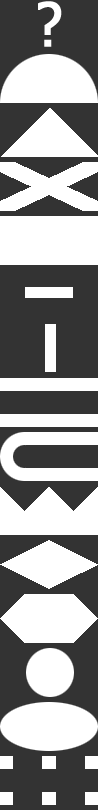
<style>
.page{position:relative;width:98px;height:810px;background:#333333}
.page>*{position:absolute;margin:0}
.t1{font:60px "Tahoma";color:#ffffff;text-transform:uppercase;font-weight:bold;scale:0.92 1}
</style>
<div class="page">
<p class="t1" style="left:38px;top:1px;width:24px;height:46px">?</p>
</div>
